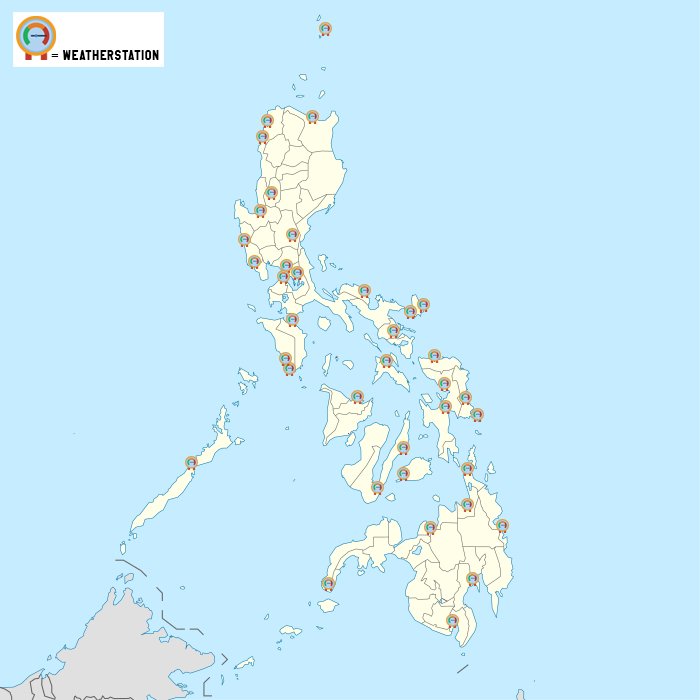
<style>
.page{position:relative;width:700px;height:700px;background:#c6ecff}
.page>*{position:absolute;margin:0}
.t1{font:12.4px "NHLPhiladelphia";letter-spacing:0.055em;color:#000000;text-transform:uppercase}
.t2{font:12.4px "TimesNewRomanPSMT";letter-spacing:0.055em;color:#000000;text-transform:uppercase}
</style>
<div class="page">
<p class="t1" style="left:51px;top:50px;width:108px;height:10px"><span class="t2">= </span>weatherstation</p>
</div>
